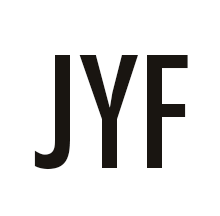
<style>
.page{position:relative;width:220px;height:216px;background:#ffffff}
.page>*{position:absolute;margin:0}
.t1{font:150px "FuturaStd-Condensed";color:#191511}
</style>
<div class="page">
<p class="t1" style="left:34px;top:55px;width:154px;height:115px">JYF</p>
</div>
